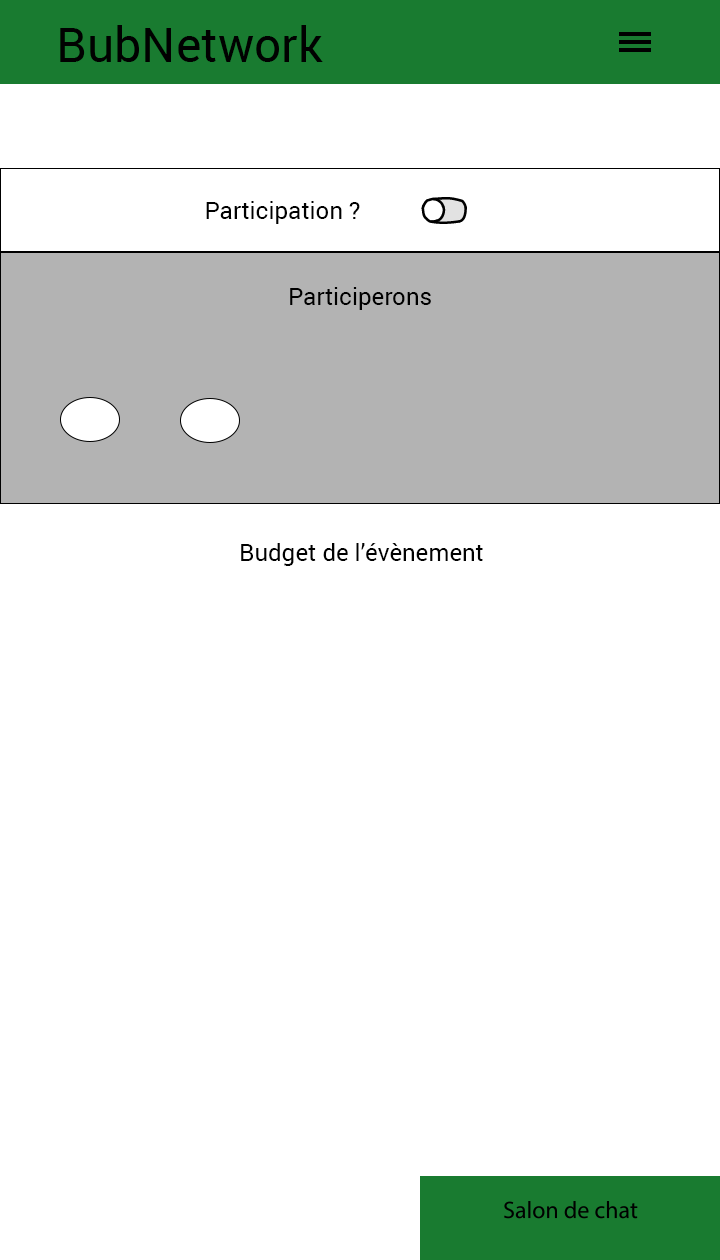
<style>
.page{position:relative;width:720px;height:1260px;background:#ffffff}
.page>*{position:absolute;margin:0}
.t1{font:48px "Roboto-Regular";color:#010101}
.t2{font:24px "Roboto-Regular";color:#000000}
</style>
<div class="page">
<p class="t1" style="left:60px;top:25px;width:263px;height:37px">BubNetwork</p>
<p class="t2" style="left:206px;top:201px;width:154px;height:23px">Participation ?</p>
<p class="t2" style="left:290px;top:287px;width:141px;height:23px">Participerons</p>
<p class="t2" style="left:241px;top:543px;width:242px;height:23px">Budget de l’évènement</p>
</div>
